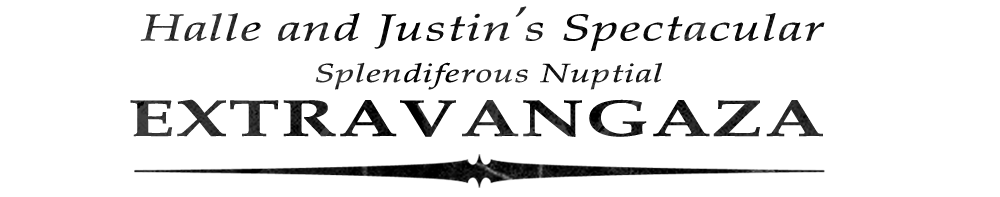
<style>
.page{position:relative;width:1000px;height:197px;background:#ffffff}
.page>*{position:absolute;margin:0}
.t1{font:37.6px "QueensParkItalic";letter-spacing:0.025em;scale:1.41 1}
.t2{font:26.3px "QueensParkItalic";letter-spacing:0.025em;scale:1.41 1}
.t3{font:52px "QueensParkBold";letter-spacing:0.025em;color:#222222;scale:1.46 1}
</style>
<div class="page">
<p class="t1" style="left:140px;top:6px;width:685px;height:46px">Halle and Justin’s Spectacular</p>
<p class="t2" style="left:315px;top:62px;width:347px;height:28px">Splendiferous Nuptial</p>
<p class="t3" style="left:130px;top:99px;width:693px;height:38px">EXTRAVANGAZA</p>
</div>
